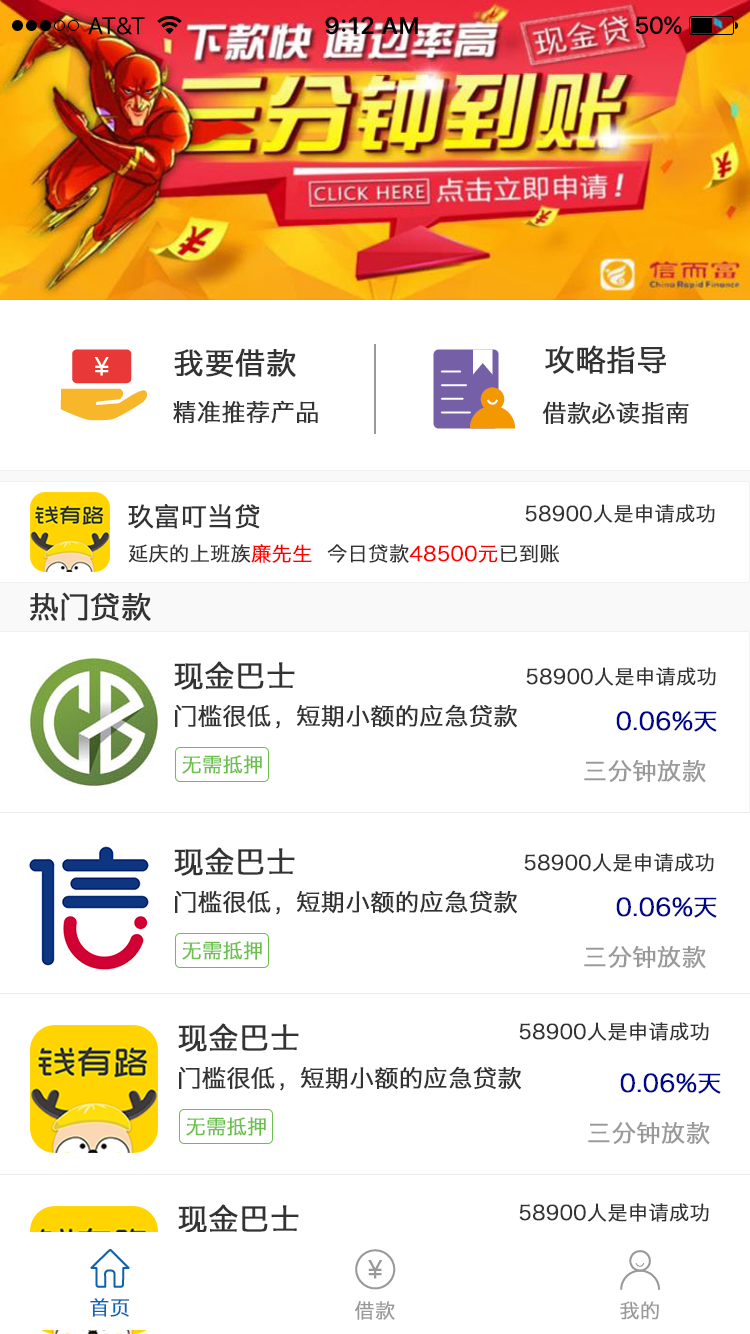
<style>
.page{position:relative;width:750px;height:1334px;background:#ffffff}
.page>*{position:absolute;margin:0}
.t1{font:30px "MingHei_R";color:#333333;font-weight:bold}
.t2{font:24px "MingHei_R";color:#333333;font-weight:bold}
.t3{font:26px "MingHei_R";color:#333333;font-weight:bold}
.t4{font:20px "MingHei_R";color:#333333;font-weight:bold}
.t5{font:20px "MingHei_R";color:#ff0000;font-weight:bold}
.t6{font:20px "MingHei_R";color:#ff0101;font-weight:bold}
.t7{font:24px "MingHei_R";color:#00068b;font-weight:bold}
.t8{font:20px "MingHei_R";color:#6bc04b;font-weight:bold}
.t9{font:24px "MingHei_R";color:#999999;font-weight:bold}
.t10{font:20px "MingHei_R";color:#0068b7;font-weight:bold}
.t11{font:20px "MingHei_R";color:#999999;font-weight:bold}
</style>
<div class="page">
<p class="t1" style="left:174px;top:348px;width:122px;height:29px">我要借款</p>
<p class="t1" style="left:545px;top:345px;width:121px;height:29px">攻略指导</p>
<p class="t2" style="left:173px;top:400px;width:145px;height:24px">精准推荐产品</p>
<p class="t2" style="left:542px;top:401px;width:147px;height:24px">借款必读指南</p>
<p class="t3" style="left:128px;top:504px;width:132px;height:25px">玖富叮当贷</p>
<p class="t4" style="left:525px;top:504px;width:190px;height:19px">58900人是申请成功</p>
<p class="t4" style="left:128px;top:544px;width:432px;height:19px">延庆的上班族<span class="t5">廉先生 </span> 今日贷款<span class="t6">48500元</span>已到账</p>
<p class="t1" style="left:30px;top:592px;width:121px;height:29px">热门贷款</p>
<p class="t1" style="left:174px;top:661px;width:121px;height:29px">现金巴士</p>
<p class="t4" style="left:526px;top:667px;width:190px;height:19px">58900人是申请成功</p>
<p class="t2" style="left:175px;top:704px;width:342px;height:25px">门槛很低，短期小额的应急贷款</p>
<p class="t7" style="left:616px;top:711px;width:101px;height:21px">0.06%天</p>
<p class="t8" style="left:182px;top:755px;width:80px;height:19px">无需抵押</p>
<p class="t9" style="left:584px;top:760px;width:122px;height:23px">三分钟放款</p>
<p class="t1" style="left:174px;top:847px;width:121px;height:29px">现金巴士</p>
<p class="t4" style="left:524px;top:853px;width:190px;height:19px">58900人是申请成功</p>
<p class="t2" style="left:175px;top:890px;width:342px;height:25px">门槛很低，短期小额的应急贷款</p>
<p class="t7" style="left:616px;top:897px;width:101px;height:21px">0.06%天</p>
<p class="t8" style="left:182px;top:941px;width:80px;height:19px">无需抵押</p>
<p class="t9" style="left:584px;top:946px;width:122px;height:23px">三分钟放款</p>
<p class="t1" style="left:178px;top:1023px;width:121px;height:29px">现金巴士</p>
<p class="t4" style="left:519px;top:1022px;width:190px;height:19px">58900人是申请成功</p>
<p class="t2" style="left:179px;top:1066px;width:342px;height:25px">门槛很低，短期小额的应急贷款</p>
<p class="t7" style="left:620px;top:1073px;width:101px;height:21px">0.06%天</p>
<p class="t8" style="left:186px;top:1117px;width:80px;height:19px">无需抵押</p>
<p class="t9" style="left:588px;top:1122px;width:122px;height:23px">三分钟放款</p>
<p class="t1" style="left:178px;top:1204px;width:121px;height:29px">现金巴士</p>
<p class="t4" style="left:519px;top:1203px;width:190px;height:19px">58900人是申请成功</p>
<p class="t10" style="left:90px;top:1298px;width:39px;height:19px">首页</p>
<p class="t11" style="left:355px;top:1301px;width:40px;height:19px">借款</p>
<p class="t11" style="left:620px;top:1301px;width:39px;height:19px">我的</p>
</div>
